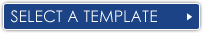
<style>
.page{position:relative;width:205px;height:35px;background:#1c4386}
.page>*{position:absolute;margin:0}
.t1{font:16px "CenturyGothic";color:#fffefe}
</style>
<div class="page">
<p class="t1" style="left:10px;top:10px;width:147px;height:13px">SELECT A TEMPLATE</p>
</div>
